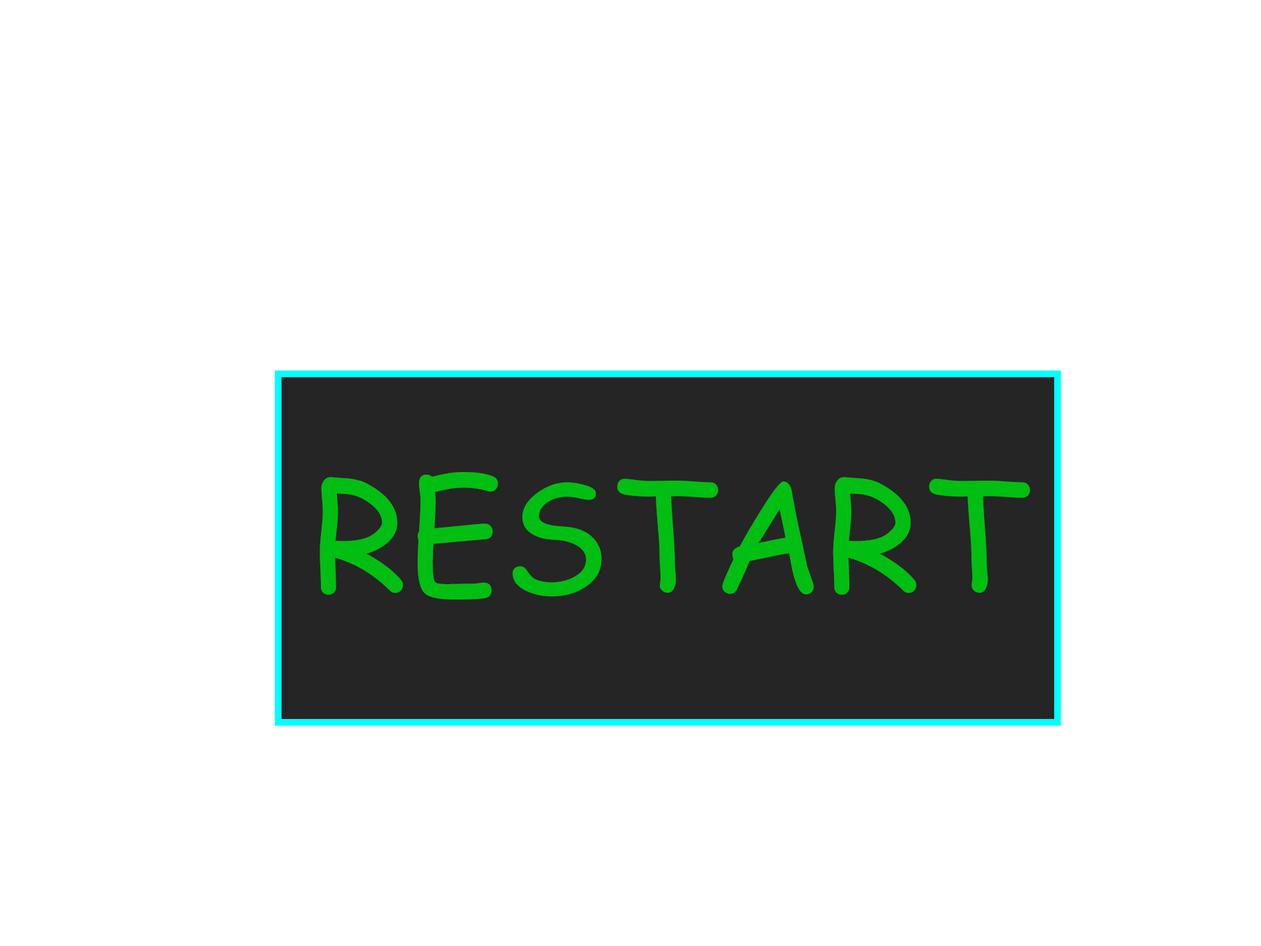
<style>
.page{position:relative;width:1261px;height:946px;background:#ffffff}
.page>*{position:absolute;margin:0}
.t1{font:152.9px "ComicSansMS";color:#00be12}
</style>
<div class="page">
<p class="t1" style="left:320px;top:472px;width:710px;height:127px">RESTART</p>
</div>
